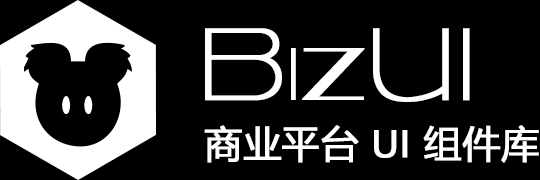
<style>
.page{position:relative;width:540px;height:180px;background:#000000}
.page>*{position:absolute;margin:0}
.t1{font:71.1px "Kilsonburg-Regular";color:#ffffff;font-weight:bold}
.t2{font:98.7px "Kilsonburg-Regular";color:#ffffff;font-weight:bold}
.t3{font:37.7px "MicrosoftYaHei";color:#ffffff;font-weight:bold}
.t4{font:37.7px "ArialMT";color:#ffffff;font-weight:bold}
</style>
<div class="page">
<p class="t1" style="left:205px;top:28px;width:265px;height:74px"><span class="t2">B</span>iz<span class="t2">UI</span></p>
<p class="t3" style="left:204px;top:125px;width:335px;height:38px">商业平台 <span class="t4">UI</span> 组件库</p>
</div>
